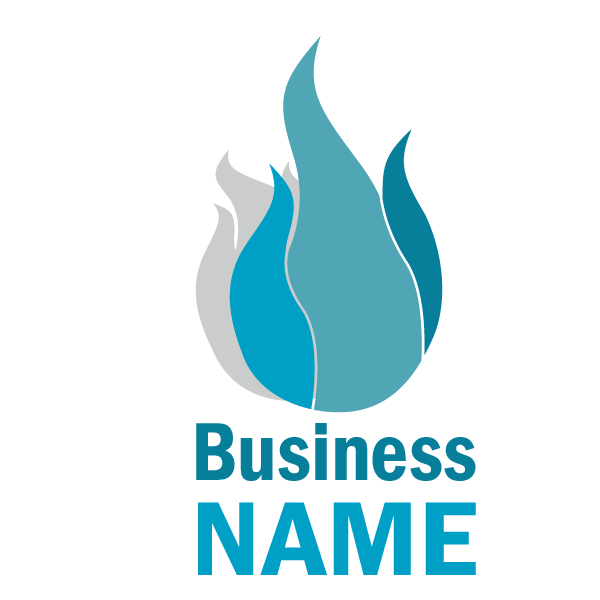
<style>
.page{position:relative;width:600px;height:600px;background:#ffffff}
.page>*{position:absolute;margin:0}
.t1{font:85px "FranklinGothic-DemiCond";color:#087f9a}
.t2{font:108.8px "FranklinGothic-DemiCond";color:#009fc5;scale:1.13 1}
</style>
<div class="page">
<p class="t1" style="left:196px;top:423px;width:280px;height:58px">Business</p>
<p class="t2" style="left:198px;top:502px;width:278px;height:73px">NAME</p>
</div>
